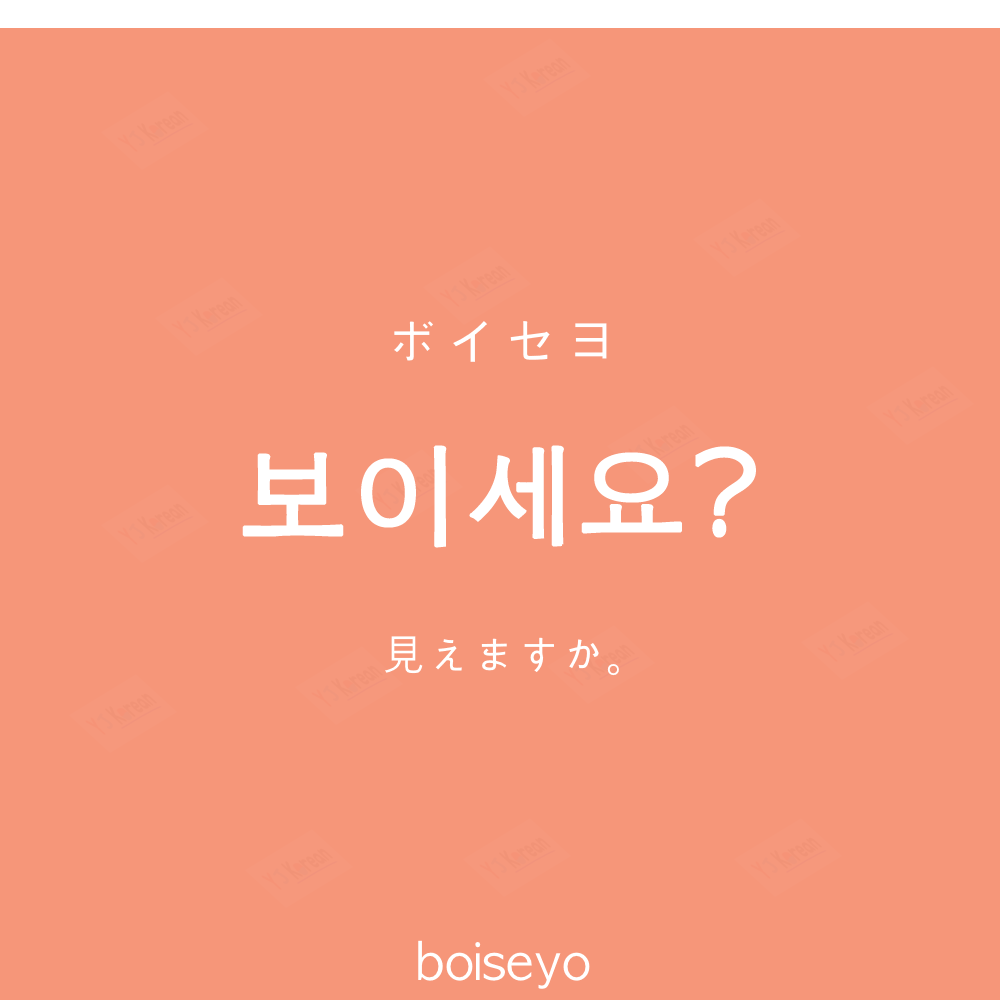
<style>
.page{position:relative;width:1000px;height:1000px;background:#f69679}
.page>*{position:absolute;margin:0}
.t1{font:60px "AppleGothic";color:#ffffff}
.t2{font:110px "AppleGothic";color:#ffffff;font-weight:bold}
.t3{font:45px "AppleGothic";color:#ffffff}
.t4{font:50px "AppleGothic";color:#ffffff}
</style>
<div class="page">
<p class="t1" style="left:394px;top:321px;width:213px;height:41px">ボイセヨ</p>
<p class="t2" style="left:242px;top:445px;width:514px;height:103px">보이세요?</p>
<p class="t3" style="left:385px;top:636px;width:234px;height:40px">見えますか。</p>
<p class="t4" style="left:418px;top:940px;width:172px;height:49px">boiseyo</p>
</div>
